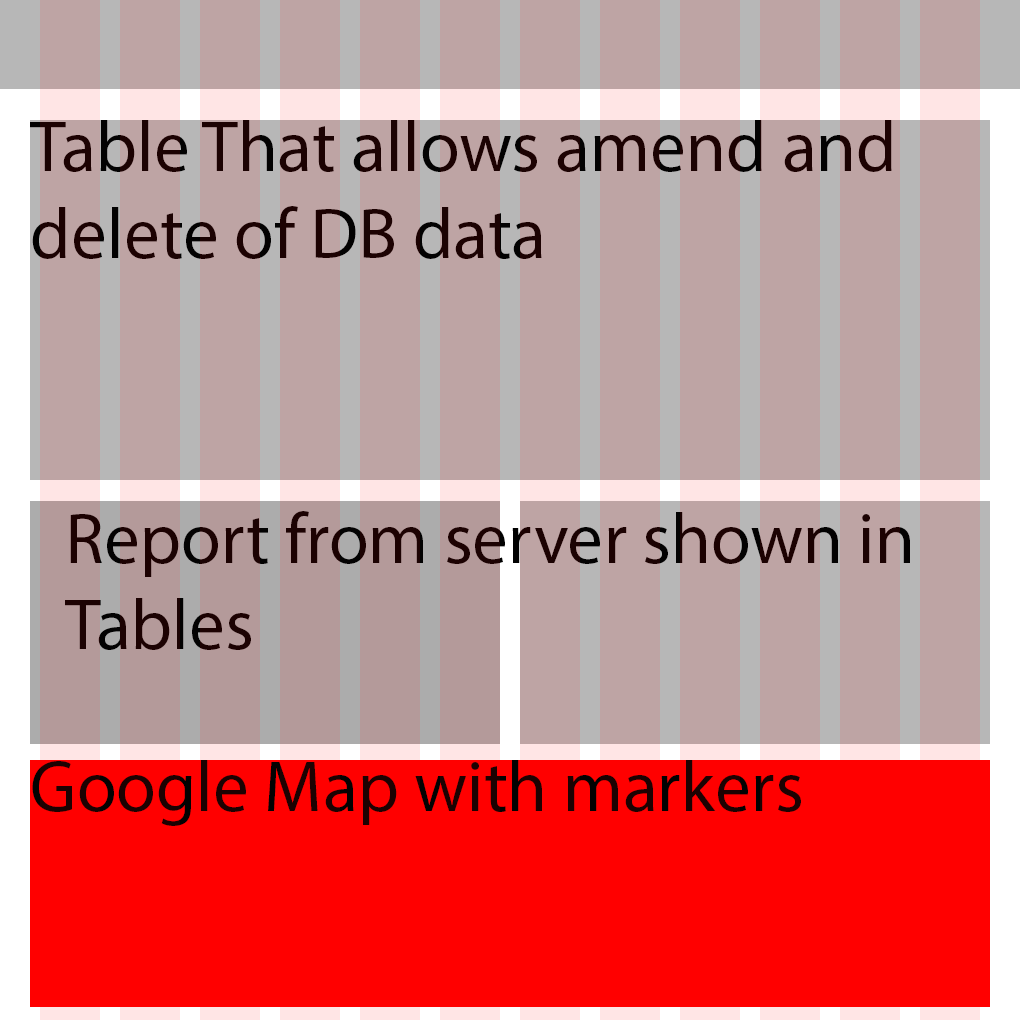
<style>
.page{position:relative;width:1020px;height:1020px;background:#bea4a4}
.page>*{position:absolute;margin:0}
.t1{font:72px "MyriadPro-Regular";color:#1c0202}
</style>
<div class="page">
<p class="t1" style="left:30px;top:120px;width:862px;height:139px">Table That allows amend and delete of DB data</p>
<p class="t1" style="left:65px;top:511px;width:845px;height:139px">Report from server shown in <br>Tables</p>
<p class="t1" style="left:32px;top:760px;width:769px;height:66px">Google Map with markers</p>
</div>
